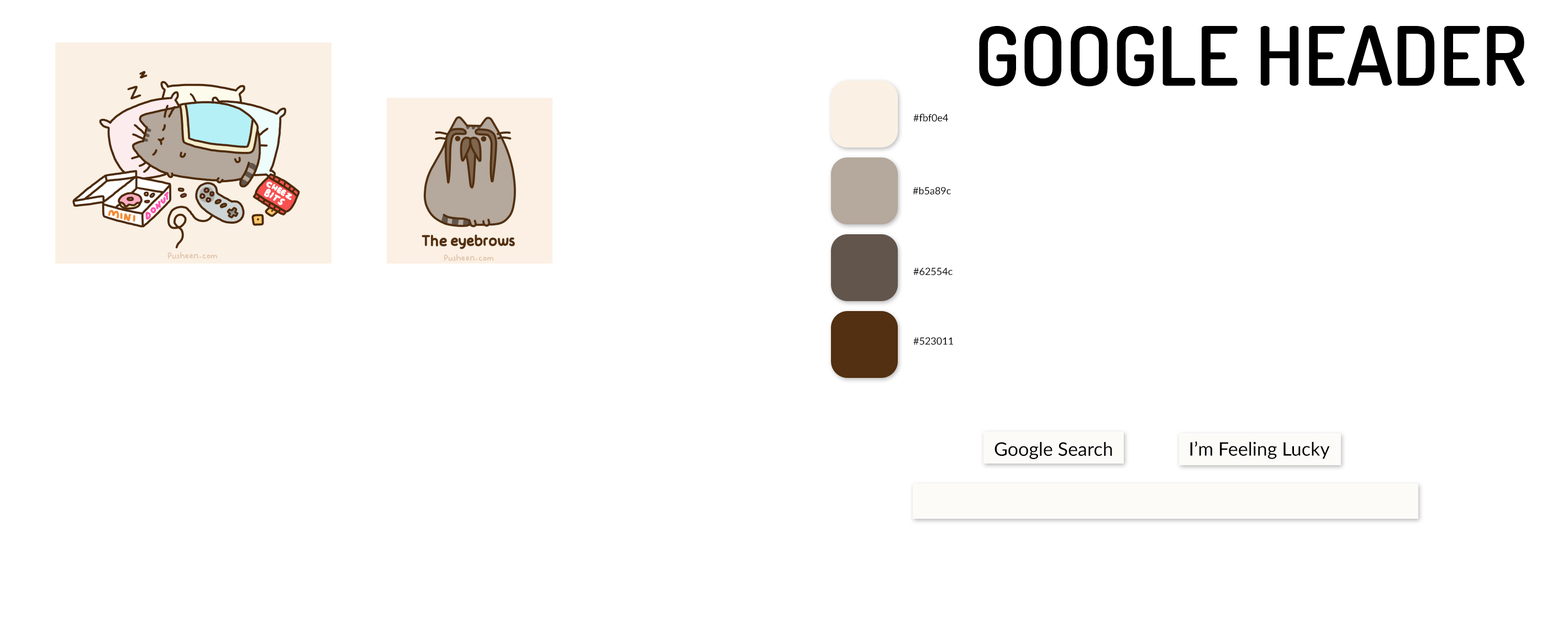
<style>
.page{position:relative;width:1568px;height:621px;background:#ffffff}
.page>*{position:absolute;margin:0}
.t1{font:13.6px "Dosis-SemiBold";color:#000000}
.t2{font:9.9px "Lato-Regular";color:#000000}
.t3{font:18.8px "Lato-Regular";color:#000000}
</style>
<div class="page">
<p class="t1" style="left:979px;top:25px;width:546px;height:62px">GOOGLE Header</p>
<p class="t2" style="left:913px;top:114px;width:35px;height:8px">#fbf0e4</p>
<p class="t2" style="left:913px;top:187px;width:38px;height:7px">#b5a89c</p>
<p class="t2" style="left:913px;top:267px;width:40px;height:8px">#62554c</p>
<p class="t2" style="left:913px;top:337px;width:40px;height:8px">#523011</p>
<p class="t3" style="left:995px;top:442px;width:117px;height:17px">Google Search</p>
<p class="t3" style="left:1190px;top:441px;width:140px;height:18px">I’m Feeling Lucky</p>
</div>
